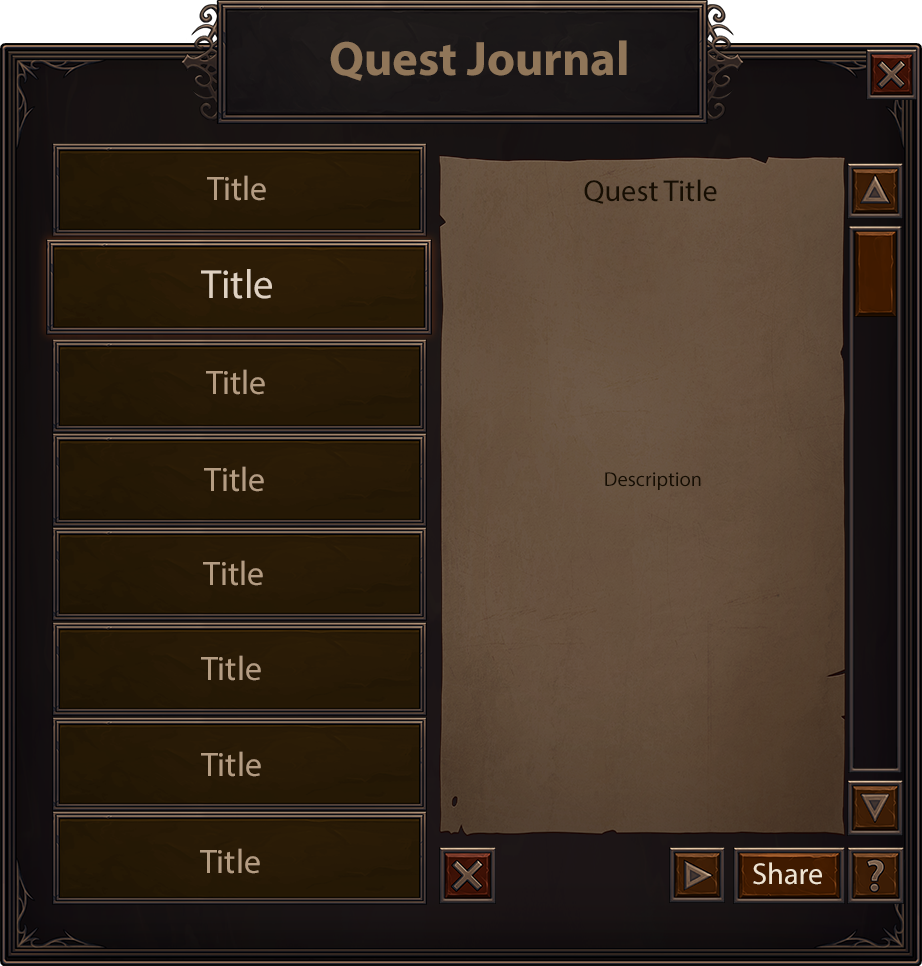
<style>
.page{position:relative;width:922px;height:966px}
.page>*{position:absolute;margin:0}
.t1{font:48.7px "MyriadPro-Bold";color:#907659}
.t2{font:34px "MyriadPro-Regular";color:#b49c82}
.t3{font:30.3px "MyriadPro-Regular";color:#160e02}
.t4{font:40.8px "MyriadPro-Regular";color:#dfd1c1}
.t5{font:20.4px "MyriadPro-Regular";color:#160e02}
.t6{font:30.3px "MyriadPro-Regular";color:#f0e4d1}
</style>
<div class="page">
<p class="t1" style="left:330px;top:40px;width:297px;height:41px">Quest Journal</p>
<p class="t2" style="left:207px;top:175px;width:59px;height:26px">Title</p>
<p class="t3" style="left:584px;top:179px;width:133px;height:25px">Quest Title</p>
<p class="t4" style="left:201px;top:269px;width:71px;height:30px">Title</p>
<p class="t2" style="left:206px;top:369px;width:59px;height:26px">Title</p>
<p class="t2" style="left:204px;top:466px;width:60px;height:26px">Title</p>
<p class="t5" style="left:605px;top:472px;width:96px;height:18px">Description</p>
<p class="t2" style="left:203px;top:560px;width:60px;height:26px">Title</p>
<p class="t2" style="left:201px;top:655px;width:60px;height:26px">Title</p>
<p class="t2" style="left:201px;top:751px;width:60px;height:26px">Title</p>
<p class="t2" style="left:200px;top:848px;width:60px;height:26px">Title</p>
<p class="t6" style="left:753px;top:862px;width:69px;height:23px">Share</p>
</div>
